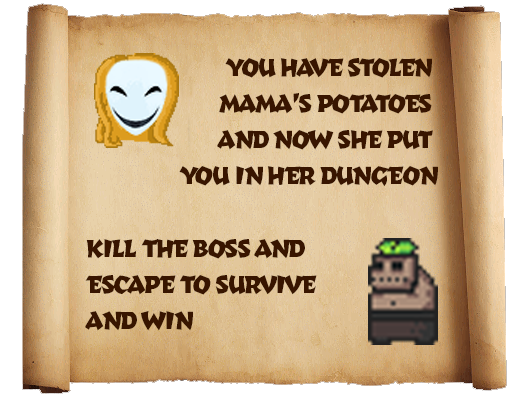
<style>
.page{position:relative;width:512px;height:396px}
.page>*{position:absolute;margin:0}
.t1{font:30px "TotallyGlyphic";letter-spacing:-0.06em;color:#381500;text-transform:uppercase}
</style>
<div class="page">
<p class="t1" style="left:179px;top:58px;width:259px;height:128px;text-align:right">You have stolen <br>mama’s potatoes <br>and now she put <br>you in her dungeon</p>
<p class="t1" style="left:85px;top:239px;width:232px;height:92px">kill the boss and <br>escape to survive <br>and win</p>
</div>
